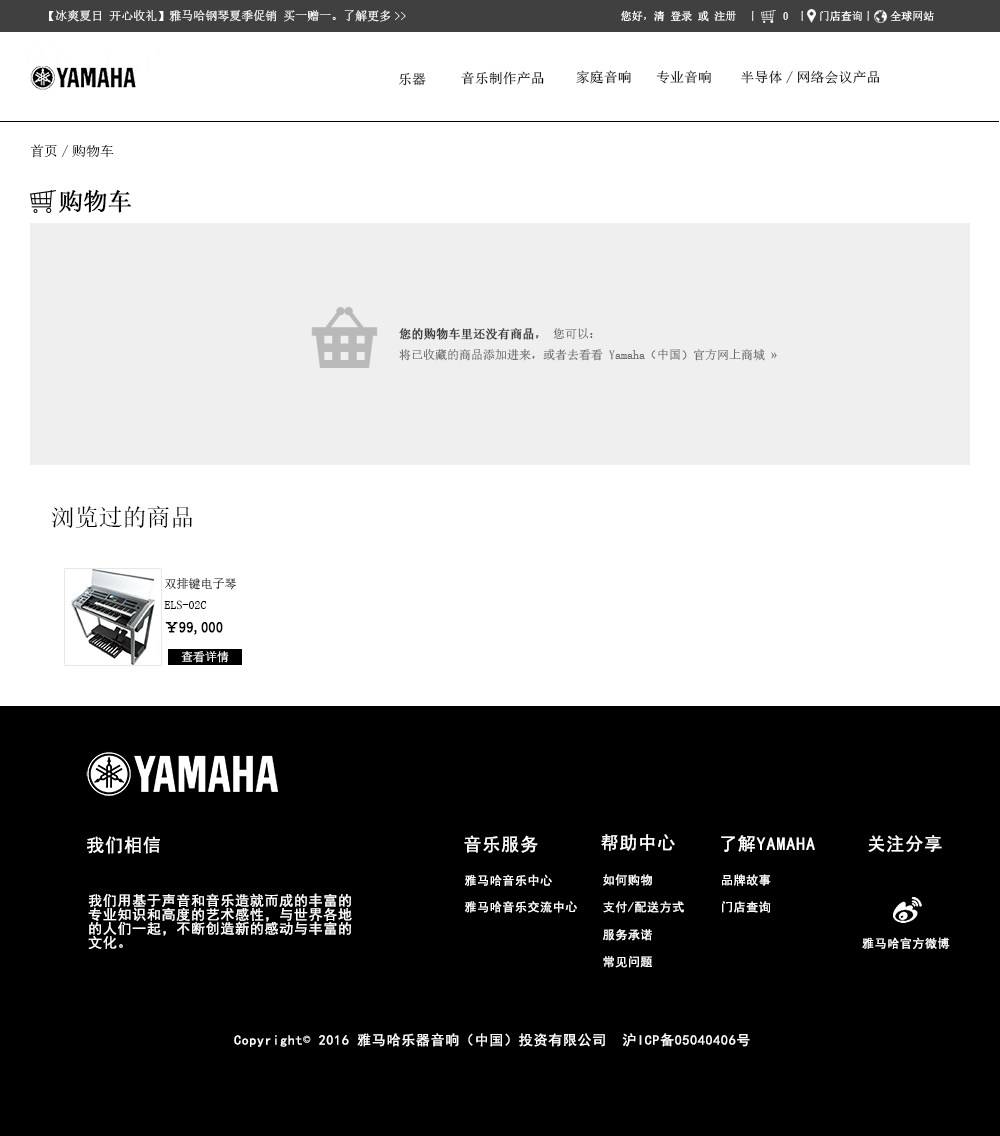
<style>
.page{position:relative;width:1000px;height:1136px;background:#ffffff}
.page>*{position:absolute;margin:0}
.t1{font:12px "SimSun";color:#ffffff}
.t2{font:11px "SimSun";color:#ffffff}
.t3{font:13.8px "SimSun"}
.t4{font:13.8px "SimSun";color:#000000}
.t5{font:14px "SimSun";color:#000000}
.t6{font:24px "SimSun";color:#000000;font-weight:bold}
.t7{font:12px "SimSun";color:#666666}
.t8{font:12px "SimSun";color:#3c3c3c;font-weight:bold}
.t9{font:12px "SimSun";color:#696969;font-weight:bold}
.t10{font:24px "SimSun";color:#000000}
.t11{font:12px "SimSun";color:#000000}
.t12{font:14px "SimSun";color:#000000;font-weight:bold}
.t13{font:18px "SimHei";letter-spacing:0.05em;color:#ffffff}
.t14{font:12px "SimHei";letter-spacing:0.05em;color:#ffffff}
.t15{font:14px/14px "SimHei";letter-spacing:0.05em;color:#ffffff}
.t16{font:13.8px "SimHei";letter-spacing:0.05em;color:#ffffff}
.t17{font:13.8px "SimSun";letter-spacing:0.05em;color:#ffffff}
</style>
<div class="page">
<p class="t1" style="left:49px;top:10px;width:357px;height:12px">【冰爽夏日 开心收礼】雅马哈钢琴夏季促销 买一赠一。 了解更多&gt;&gt;</p>
<p class="t2" style="left:621px;top:10px;width:313px;height:12px">您好，清 登录 或 注册  丨    ０ 丨  门店查询丨   全球网站</p>
<p class="t3" style="left:399px;top:73px;width:27px;height:13px">乐器</p>
<p class="t4" style="left:461px;top:71px;width:83px;height:14px">音乐制作产品</p>
<p class="t4" style="left:576px;top:70px;width:55px;height:14px">家庭音响</p>
<p class="t4" style="left:656px;top:70px;width:55px;height:14px">专业音响</p>
<p class="t4" style="left:741px;top:70px;width:138px;height:14px">半导体/网络会议产品</p>
<p class="t5" style="left:31px;top:144px;width:83px;height:14px">首页/购物车</p>
<p class="t6" style="left:59px;top:190px;width:72px;height:23px">购物车</p>
<p class="t7" style="left:399px;top:328px;width:378px;height:33px"><span class="t8">您的购物车里还没有商品</span><span class="t9">，</span>您可以：<br>将已收藏的商品添加进来，或者去看看 Yamaha（中国）官方网上商城 »</p>
<p class="t10" style="left:51px;top:506px;width:141px;height:22px">浏览过的商品</p>
<p class="t11" style="left:164px;top:578px;width:72px;height:57px">双排键电子琴<br>ELS-02C<br><span class="t12">￥99,000</span></p>
<p class="t1" style="left:181px;top:651px;width:48px;height:12px">查看详情</p>
<p class="t13" style="left:87px;top:836px;width:73px;height:18px">我们相信</p>
<p class="t13" style="left:464px;top:835px;width:74px;height:18px">音乐服务</p>
<p class="t13" style="left:601px;top:834px;width:74px;height:17px">帮助中心</p>
<p class="t13" style="left:721px;top:835px;width:94px;height:17px">了解YAMAHA</p>
<p class="t13" style="left:868px;top:835px;width:74px;height:18px">关注分享</p>
<p class="t14" style="left:465px;top:874px;width:87px;height:12px">雅马哈音乐中心</p>
<p class="t14" style="left:603px;top:874px;width:49px;height:12px">如何购物</p>
<p class="t14" style="left:722px;top:874px;width:49px;height:12px">品牌故事</p>
<p class="t15" style="left:88px;top:893px;width:264px;height:56px">我们用基于声音和音乐造就而成的丰富的<br>专业知识和高度的艺术感性，与世界各地<br>的人们一起，不断创造新的感动与丰富的<br>文化。</p>
<p class="t14" style="left:465px;top:901px;width:112px;height:12px">雅马哈音乐交流中心</p>
<p class="t14" style="left:603px;top:901px;width:81px;height:12px">支付/配送方式</p>
<p class="t14" style="left:722px;top:901px;width:49px;height:12px">门店查询</p>
<p class="t14" style="left:603px;top:929px;width:49px;height:12px">服务承诺</p>
<p class="t14" style="left:862px;top:937px;width:88px;height:12px">雅马哈官方微博</p>
<p class="t14" style="left:603px;top:956px;width:49px;height:12px">常见问题</p>
<p class="t16" style="left:234px;top:1033px;width:516px;height:14px">Copyright<span class="t17">©</span> 2016 雅马哈乐器音响（中国）投资有限公司  沪ICP备05040406号</p>
</div>
